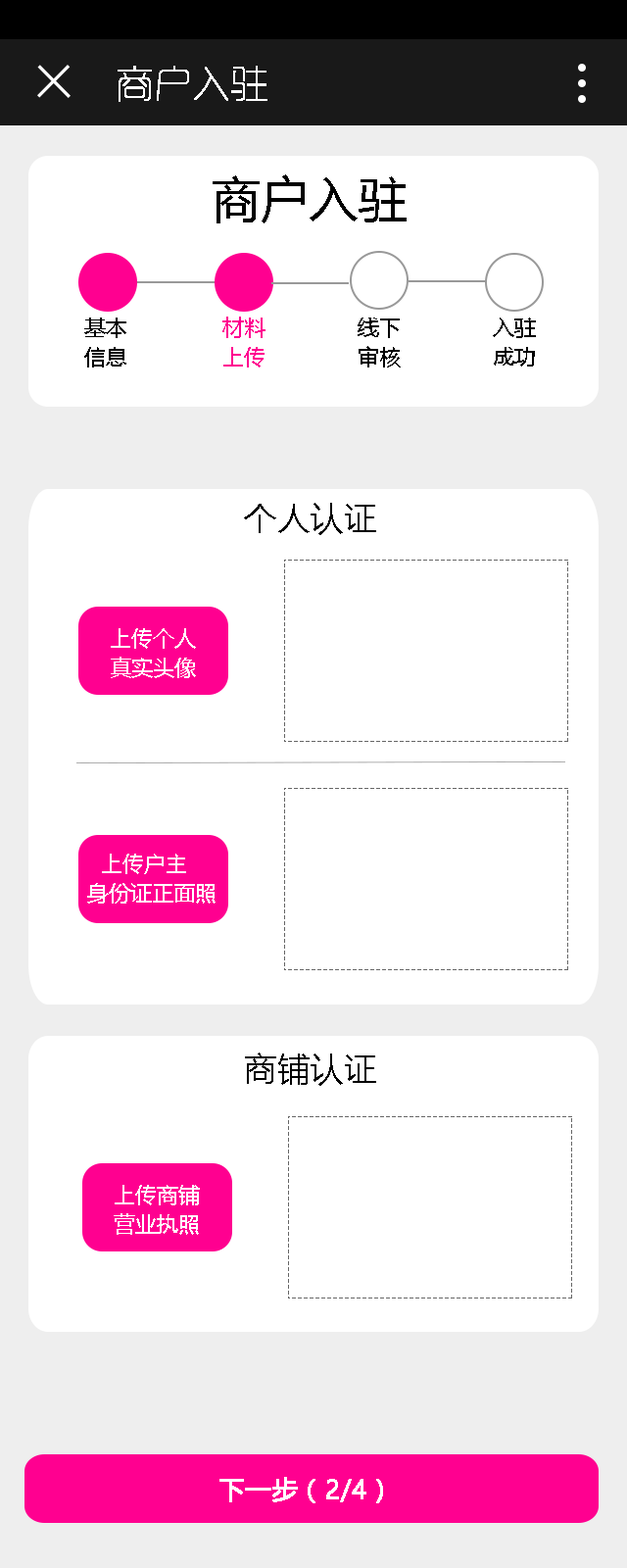
<style>
.page{position:relative;width:627px;height:1568px;background:#ffffff}
.page>*{position:absolute;margin:0}
.t1{font:37.2px "RTWSYueGoG0v1-ExLight";color:#ffffff;font-weight:bold}
.t2{font:49px "MicrosoftYaHei";color:#000000}
.t3{font:21.6px/29.4px "MicrosoftYaHei";color:#000000}
.t4{font:21.6px/29.4px "MicrosoftYaHei";color:#ff0090}
.t5{font:33.3px "MicrosoftYaHei";color:#000000}
.t6{font:21.6px/29.4px "MicrosoftYaHei";color:#ffffff}
.t7{font:25.5px "MicrosoftYaHei";color:#ffffff;font-weight:bold}
</style>
<div class="page">
<p class="t1" style="left:118px;top:66px;width:150px;height:36px">商户入驻</p>
<p class="t2" style="left:213px;top:174px;width:194px;height:49px">商户入驻</p>
<p class="t3" style="left:84px;top:318px;width:42px;height:50px">基本<br>信息</p>
<p class="t4" style="left:222px;top:317px;width:44px;height:51px">材料<br>上传</p>
<p class="t3" style="left:358px;top:318px;width:43px;height:50px">线下<br>审核</p>
<p class="t3" style="left:493px;top:318px;width:43px;height:49px">入驻<br>成功</p>
<p class="t5" style="left:244px;top:503px;width:132px;height:32px">个人认证</p>
<p class="t6" style="left:111px;top:628px;width:85px;height:50px">上传个人<br>真实头像</p>
<p class="t6" style="left:87px;top:854px;width:129px;height:50px">上传户主<br>身份证正面照</p>
<p class="t5" style="left:245px;top:1053px;width:131px;height:33px">商铺认证</p>
<p class="t6" style="left:114px;top:1185px;width:86px;height:50px">上传商铺<br>营业执照</p>
<p class="t7" style="left:220px;top:1477px;width:163px;height:26px">下一步（2/4）</p>
</div>
